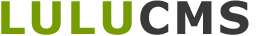
<style>
.page{position:relative;width:262px;height:36px;background:#ffffff}
.page>*{position:absolute;margin:0}
.t1{font:45px "Verdana-Bold";letter-spacing:0.06em;color:#759d01;text-transform:uppercase}
.t2{font:45px "Verdana-Bold";letter-spacing:0.06em;color:#393939;text-transform:uppercase}
</style>
<div class="page">
<p class="t1" style="left:1px;top:1px;width:131px;height:34px">LuLu</p>
<p class="t2" style="left:140px;top:0px;width:109px;height:35px">CMS</p>
</div>
